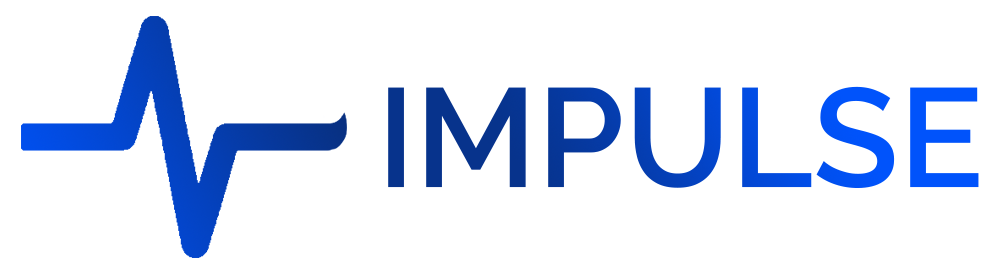
<style>
.page{position:relative;width:1000px;height:275px;background:#ffffff}
.page>*{position:absolute;margin:0}
.t1{font:139.7px "Raleway-SemiBold";letter-spacing:0.005em}
</style>
<div class="page">
<p class="t1" style="left:388px;top:86px;width:591px;height:102px">IMPULSE</p>
</div>
